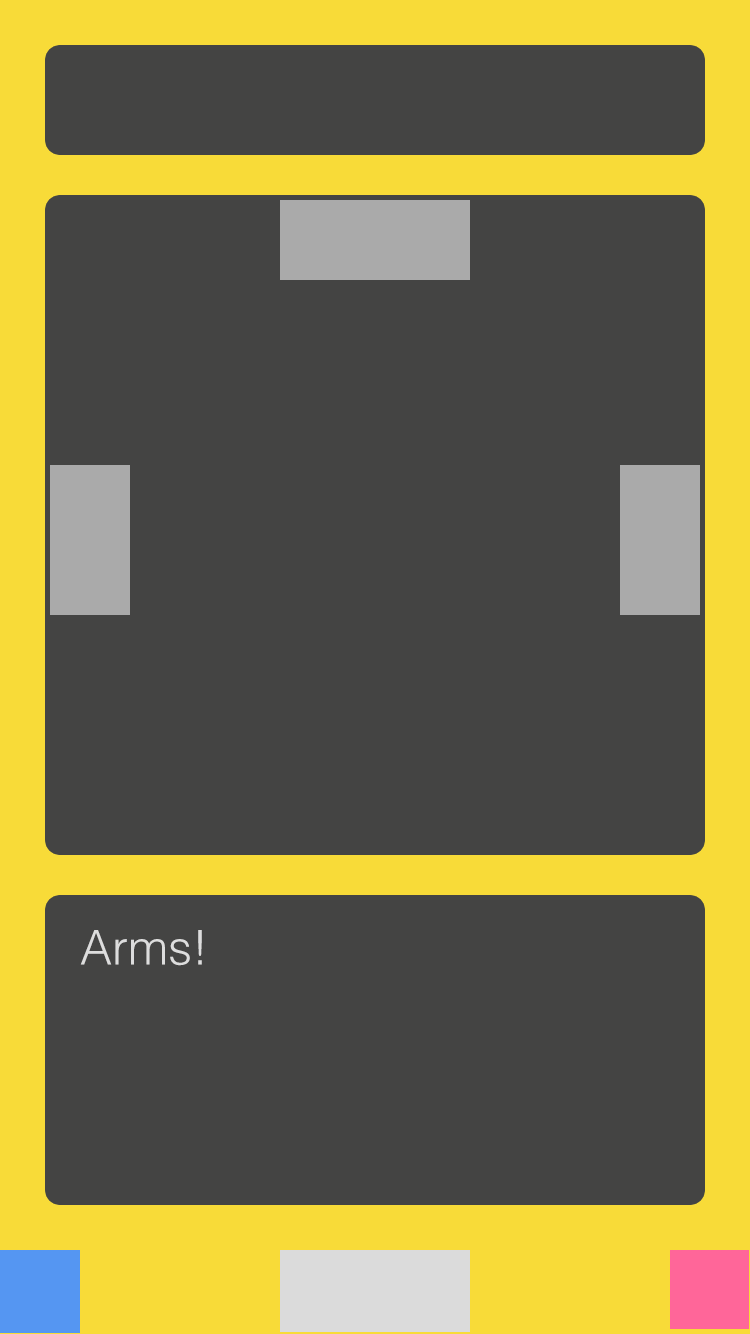
<style>
.page{position:relative;width:750px;height:1334px;background:#444443}
.page>*{position:absolute;margin:0}
.t1{font:48px "Helvetica-Light";color:#dddddd}
</style>
<div class="page">
<p class="t1" style="left:80px;top:930px;width:122px;height:36px">Arms!</p>
</div>
